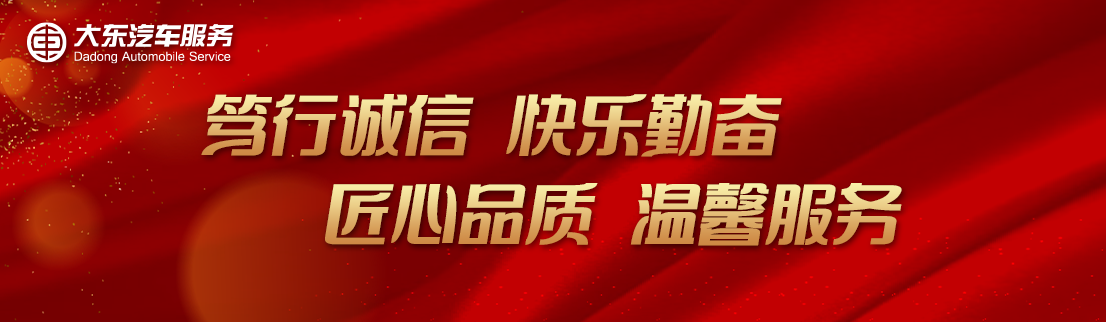
<style>
.page{position:relative;width:1106px;height:322px}
.page>*{position:absolute;margin:0}
.t1{font:68.4px "FZSUXSYBJW--GB1-0"}
</style>
<div class="page">
<p class="t1" style="left:201px;top:94px;width:581px;height:63px">笃行诚信  快乐勤奋</p>
<p class="t1" style="left:325px;top:183px;width:577px;height:63px">匠心品质  温馨服务</p>
</div>
